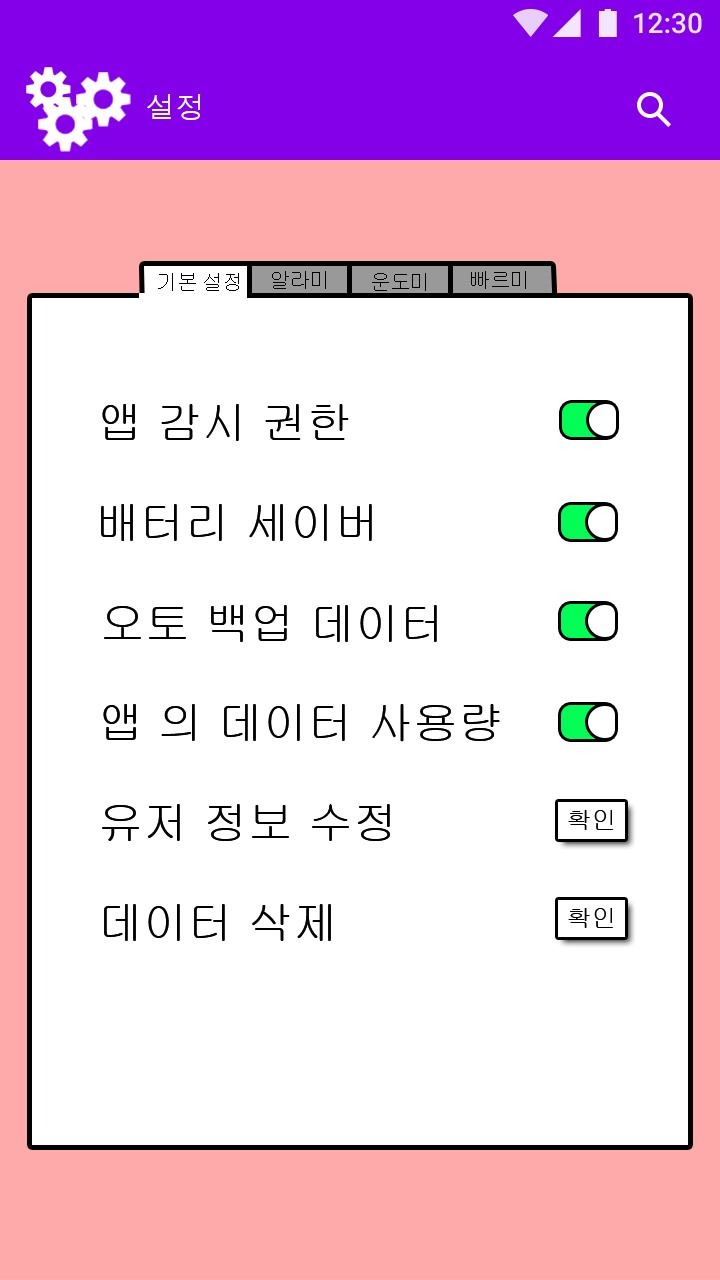
<style>
.page{position:relative;width:720px;height:1280px;background:#ffffff}
.page>*{position:absolute;margin:0}
.t1{font:30px "Dotum";color:#ffffff}
.t2{font:20px "Gulim";color:#000000}
.t3{font:45px "Gulim";color:#000000}
.t4{font:25px "Gulim";color:#000000}
</style>
<div class="page">
<p class="t1" style="left:147px;top:94px;width:54px;height:26px">설정</p>
<p class="t2" style="left:158px;top:273px;width:81px;height:18px">기본 설정</p>
<p class="t2" style="left:272px;top:271px;width:54px;height:18px">알라미</p>
<p class="t2" style="left:372px;top:273px;width:54px;height:18px">운도미</p>
<p class="t2" style="left:471px;top:271px;width:55px;height:18px">빠르미</p>
<p class="t3" style="left:102px;top:404px;width:247px;height:37px">앱 감시 권한</p>
<p class="t3" style="left:101px;top:504px;width:271px;height:37px">배터리 세이버</p>
<p class="t3" style="left:104px;top:605px;width:333px;height:37px">오토 백업 데이터</p>
<p class="t3" style="left:103px;top:704px;width:397px;height:38px">앱 의 데이터 사용량</p>
<p class="t3" style="left:102px;top:804px;width:288px;height:37px">유저 정보 수정</p>
<p class="t4" style="left:568px;top:810px;width:45px;height:20px">확인</p>
<p class="t3" style="left:104px;top:904px;width:227px;height:37px">데이터 삭제</p>
<p class="t4" style="left:568px;top:908px;width:45px;height:20px">확인</p>
</div>
